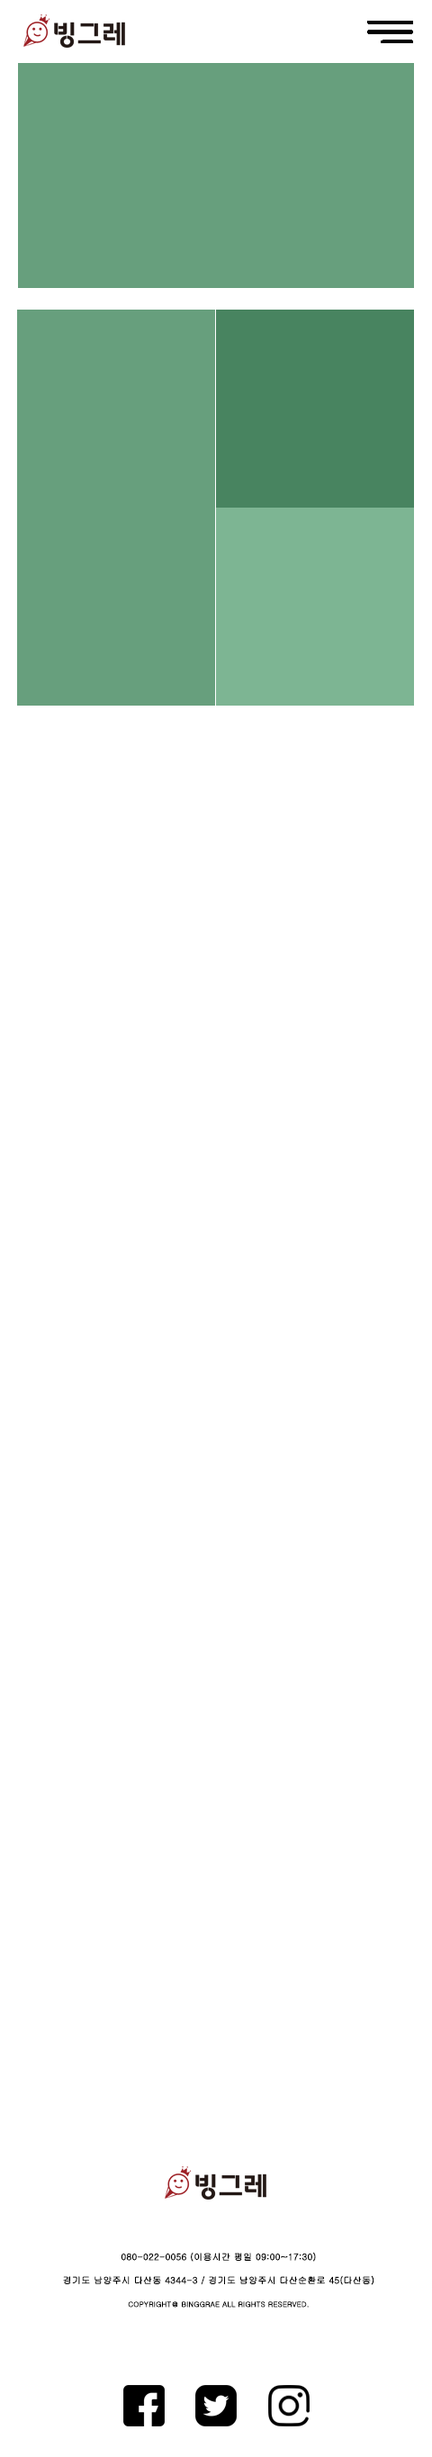
<style>
.page{position:relative;width:432px;height:2457px;background:#ffffff}
.page>*{position:absolute;margin:0}
.t1{font:9px/11.7px "Gulim";color:#000000;text-transform:uppercase;font-weight:bold}
.t2{font:7.2px/11.7px "Gulim";color:#000000;text-transform:uppercase;font-weight:bold}
</style>
<div class="page">
<p class="t1" style="left:63px;top:2252px;width:311px;height:56px;text-align:center">080-022-0056 (이용시간 평일 09:00~17:30)<br><br>경기도 남양주시 다산동 4344-3 / 경기도 남양주시 다산순환로 45(다산동)<br><span class="t2"><br>copyright＠ Binggrae all rights reserved.</span></p>
</div>
